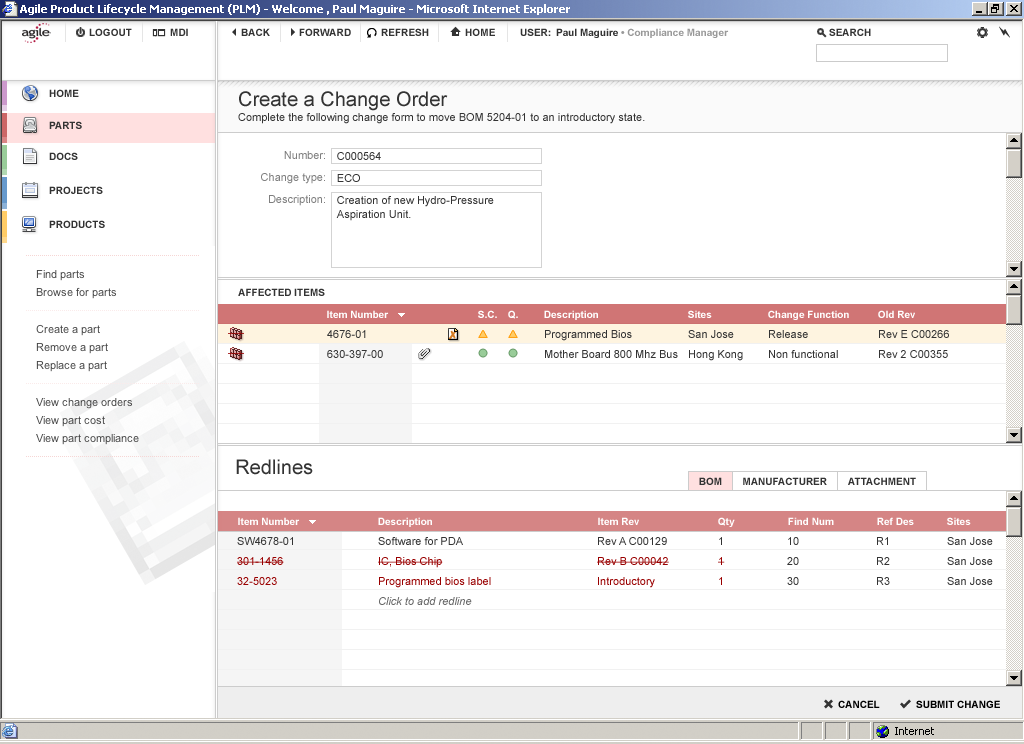
<style>
.page{position:relative;width:1024px;height:744px;background:#ffffff}
.page>*{position:absolute;margin:0}
.t1{font:20px "ArialMT";color:#333333}
.t2{font:11px "ArialMT";color:#333333}
.t3{font:11px/22px "ArialMT";color:#7f7f7f}
.t4{font:11px/22px "ArialMT";color:#333333}
.t5{font:10px "Arial-BoldMT";color:#333333}
.t6{font:10px "Arial-BoldMT";color:#ffffff}
.t7{font:11px/10px "ArialMT";color:#333333}
.t8{font:11px/10px "ArialMT";color:#990000}
.t9{font:11px/10px "Arial-ItalicMT";color:#666666}
.t10{font:10px "Arial-BoldMT";color:#000000}
</style>
<div class="page">
<p class="t1" style="left:239px;top:91px;width:209px;height:20px">Create a Change Order</p>
<p class="t2" style="left:238px;top:113px;width:407px;height:11px">Complete the following change form to move BOM 5204-01 to an introductory state.</p>
<p class="t3" style="left:261px;top:151px;width:64px;height:55px;text-align:right">Number:<br>Change type:<br>Description:</p>
<p class="t4" style="left:336px;top:152px;width:158px;height:69px">C000564<br>ECO<br>Creation of new Hydro-Pressure <br><span class="t2">Aspiration Unit.</span></p>
<p class="t5" style="left:238px;top:288px;width:87px;height:8px">AFFECTED ITEMS</p>
<p class="t6" style="left:327px;top:310px;width:62px;height:8px">Item Number</p>
<p class="t6" style="left:478px;top:310px;width:19px;height:8px">S.C.</p>
<p class="t6" style="left:508px;top:310px;width:10px;height:9px">Q.</p>
<p class="t6" style="left:544px;top:310px;width:54px;height:10px">Description</p>
<p class="t6" style="left:688px;top:310px;width:24px;height:8px">Sites</p>
<p class="t6" style="left:768px;top:310px;width:81px;height:10px">Change Function</p>
<p class="t6" style="left:878px;top:310px;width:37px;height:8px">Old Rev</p>
<p class="t7" style="left:327px;top:330px;width:56px;height:28px">4676-01<br><br>630-397-00</p>
<p class="t7" style="left:545px;top:330px;width:133px;height:28px">Programmed Bios<br><br>Mother Board 800 Mhz Bus</p>
<p class="t7" style="left:688px;top:330px;width:55px;height:31px">San Jose<br><br>Hong Kong</p>
<p class="t7" style="left:769px;top:330px;width:69px;height:28px">Release<br><br>Non functional</p>
<p class="t7" style="left:879px;top:330px;width:70px;height:28px">Rev E C00266<br><br>Rev 2 C00355</p>
<p class="t1" style="left:236px;top:459px;width:77px;height:16px">Redlines</p>
<p class="t5" style="left:699px;top:477px;width:23px;height:8px">BOM</p>
<p class="t5" style="left:743px;top:477px;width:84px;height:8px">MANUFACTURER</p>
<p class="t5" style="left:848px;top:477px;width:68px;height:8px">ATTACHMENT</p>
<p class="t6" style="left:238px;top:517px;width:62px;height:8px">Item Number</p>
<p class="t6" style="left:378px;top:517px;width:54px;height:10px">Description</p>
<p class="t6" style="left:598px;top:517px;width:41px;height:8px">Item Rev</p>
<p class="t6" style="left:718px;top:517px;width:17px;height:10px">Qty</p>
<p class="t6" style="left:788px;top:517px;width:46px;height:8px">Find Num</p>
<p class="t6" style="left:877px;top:517px;width:37px;height:8px">Ref Des</p>
<p class="t6" style="left:947px;top:517px;width:24px;height:8px">Sites</p>
<p class="t8" style="left:237px;top:537px;width:56px;height:48px"><span class="t7">SW4678-01<br><br></span>301-1456<br><br>32-5023</p>
<p class="t8" style="left:378px;top:537px;width:113px;height:68px"><span class="t7">Software for PDA<br><br></span>IC, Bios Chip<br><br>Programmed bios label<br><br><span class="t9">Click to add redline</span></p>
<p class="t8" style="left:597px;top:537px;width:72px;height:51px"><span class="t7">Rev A C00129<br><br></span>Rev B C00042<br><br>Introductory</p>
<p class="t8" style="left:718px;top:537px;width:7px;height:48px"><span class="t7">1<br><br></span>1<br><br>1</p>
<p class="t7" style="left:787px;top:537px;width:12px;height:48px">10<br><br>20<br><br>30</p>
<p class="t7" style="left:877px;top:537px;width:13px;height:48px">R1<br><br>R2<br><br>R3</p>
<p class="t7" style="left:947px;top:537px;width:46px;height:48px">San Jose<br><br>San Jose<br><br>San Jose</p>
<p class="t10" style="left:838px;top:700px;width:42px;height:8px">CANCEL</p>
<p class="t10" style="left:916px;top:700px;width:84px;height:8px">SUBMIT CHANGE</p>
</div>
